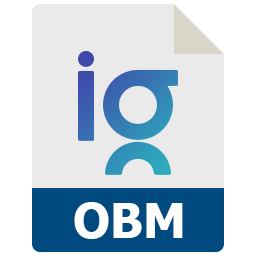
<style>
.page{position:relative;width:256px;height:256px;background:#eaeaea}
.page>*{position:absolute;margin:0}
.t1{font:48px "Tahoma-Bold";color:#ffffff}
</style>
<div class="page">
<p class="t1" style="left:74px;top:202px;width:109px;height:37px">OBM</p>
</div>
